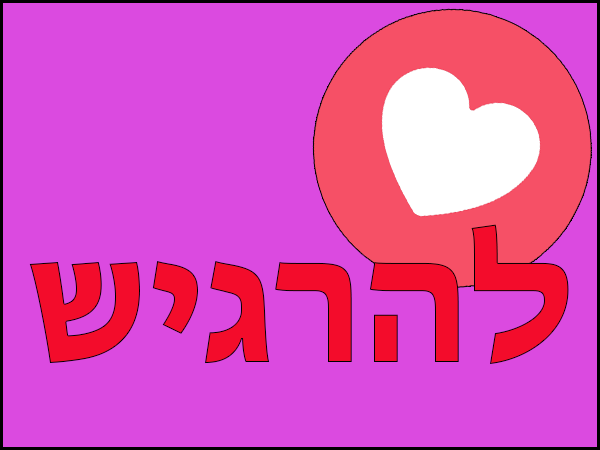
<style>
.page{position:relative;width:600px;height:450px;background:#db4ae0}
.page>*{position:absolute;margin:0}
.t1{font:179.2px "MyriadHebrew-Bold";color:#f30c2b}
</style>
<div class="page">
<p class="t1" style="left:29px;top:224px;width:540px;height:140px">להרגיש</p>
</div>
